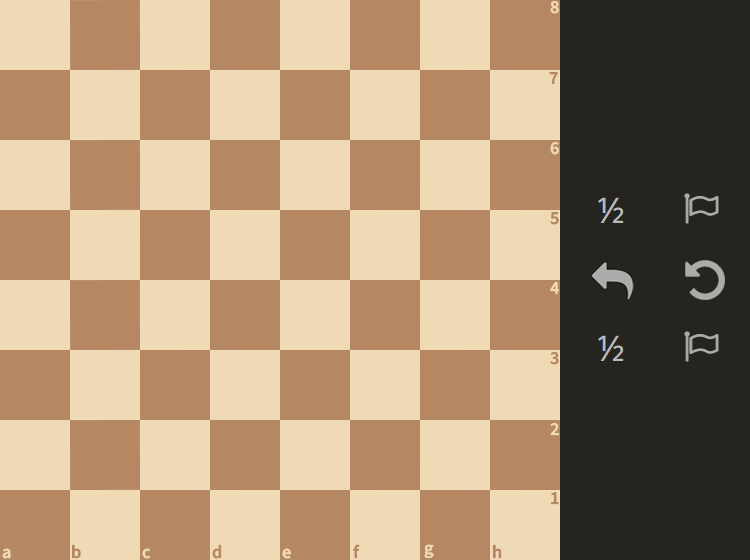
<style>
.page{position:relative;width:750px;height:560px;background:#f0d9b5}
.page>*{position:absolute;margin:0}
.t1{font:18.3px "SourceSansRoman-Semibold";color:#f0d9b5}
.t2{font:18.3px "SourceSansRoman-Semibold";color:#b58863}
</style>
<div class="page">
<p class="t1" style="left:550px;top:1px;width:9px;height:13px">8</p>
<p class="t2" style="left:549px;top:72px;width:9px;height:13px">7</p>
<p class="t1" style="left:550px;top:142px;width:9px;height:13px">6</p>
<p class="t2" style="left:550px;top:212px;width:9px;height:13px">5</p>
<p class="t1" style="left:550px;top:282px;width:9px;height:13px">4</p>
<p class="t2" style="left:550px;top:352px;width:9px;height:13px">3</p>
<p class="t1" style="left:550px;top:423px;width:9px;height:13px">2</p>
<p class="t2" style="left:551px;top:492px;width:8px;height:13px">1</p>
<p class="t2" style="left:72px;top:544px;width:9px;height:15px">b</p>
<p class="t2" style="left:212px;top:544px;width:10px;height:15px">d</p>
<p class="t2" style="left:353px;top:544px;width:7px;height:15px">f</p>
<p class="t1" style="left:424px;top:544px;width:10px;height:15px">g</p>
<p class="t2" style="left:493px;top:544px;width:9px;height:15px">h</p>
<p class="t1" style="left:2px;top:548px;width:9px;height:11px">a</p>
<p class="t1" style="left:142px;top:548px;width:8px;height:11px">c</p>
<p class="t1" style="left:282px;top:548px;width:9px;height:11px">e</p>
</div>
